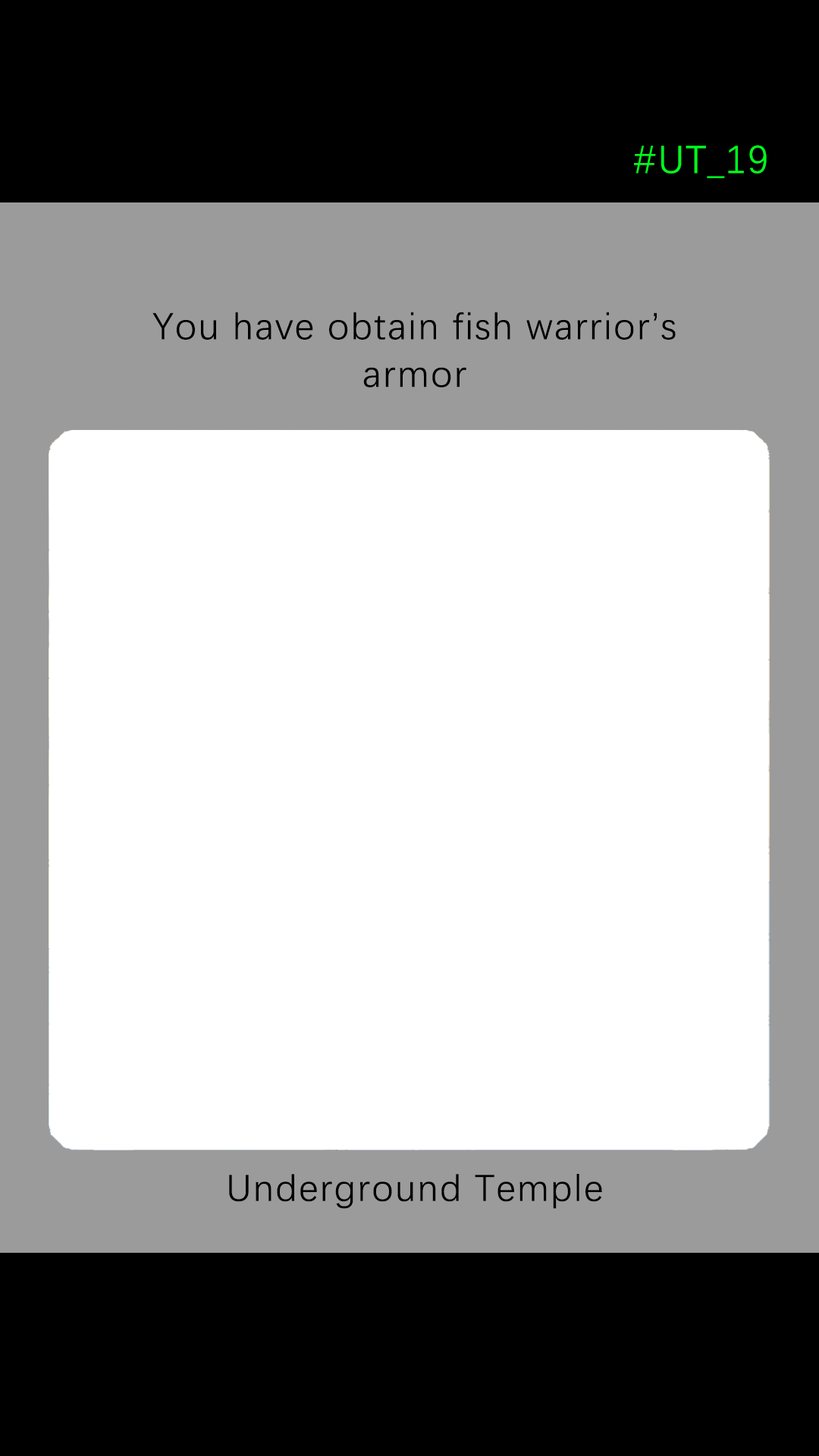
<style>
.page{position:relative;width:819px;height:1456px;background:#ffffff}
.page>*{position:absolute;margin:0}
.t1{font:39.2px "DengXian-Regular";letter-spacing:0.04em;color:#00ff1e}
.t2{font:37.9px/47.6px "DengXian-Regular";letter-spacing:0.04em;color:#000000}
.t3{font:37.9px "DengXian-Regular";letter-spacing:0.04em;color:#000000}
</style>
<div class="page">
<p class="t1" style="left:634px;top:145px;width:133px;height:33px">#UT_19</p>
<p class="t2" style="left:152px;top:312px;width:524px;height:76px;text-align:center">You have obtain fish warrior’s<br>armor</p>
<p class="t3" style="left:229px;top:1174px;width:373px;height:35px">Underground Temple</p>
</div>
